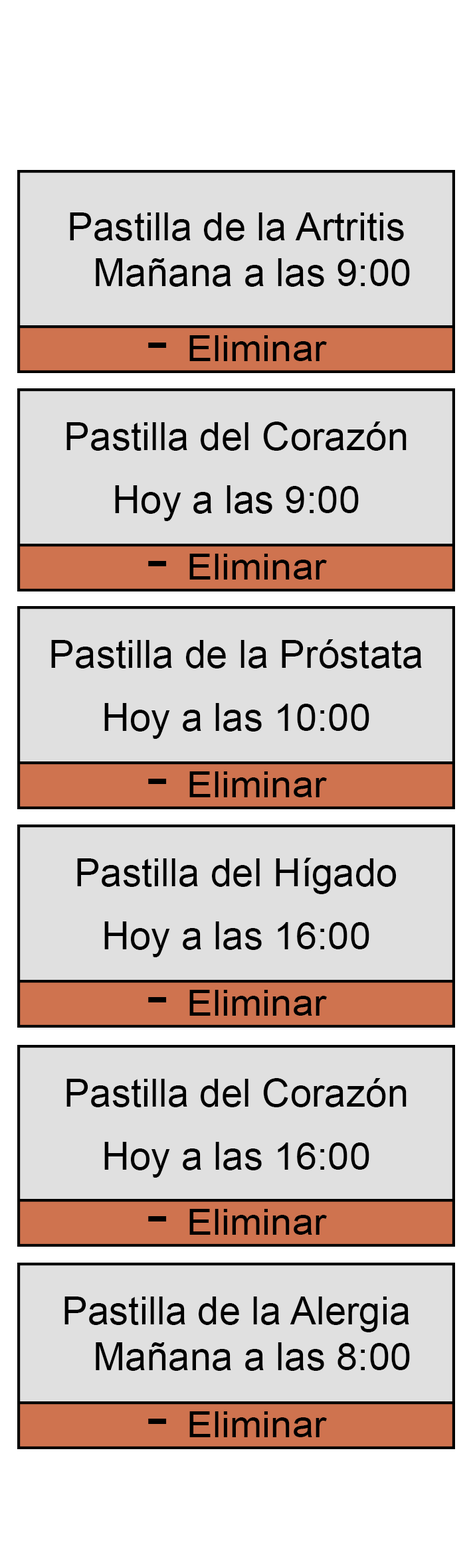
<style>
.page{position:relative;width:471px;height:1568px;background:#e0e0e0}
.page>*{position:absolute;margin:0}
.t1{font:38.7px "ArialMT";color:#000000}
.t2{font:35.6px "ArialMT";color:#000000;scale:1.09 1}
.t3{font:61.1px "ArialMT";color:#000000;scale:1.09 1}
</style>
<div class="page">
<p class="t1" style="left:70px;top:212px;width:334px;height:29px">Pastilla de la Artritis</p>
<p class="t1" style="left:96px;top:258px;width:314px;height:29px">Mañana a las 9:00</p>
<p class="t2" style="left:148px;top:335px;width:179px;height:26px"><span class="t3">- </span>Eliminar</p>
<p class="t1" style="left:66px;top:422px;width:340px;height:29px">Pastilla del Corazón</p>
<p class="t1" style="left:115px;top:485px;width:243px;height:36px">Hoy a las 9:00</p>
<p class="t2" style="left:148px;top:554px;width:179px;height:26px"><span class="t3">- </span>Eliminar</p>
<p class="t1" style="left:51px;top:639px;width:371px;height:29px">Pastilla de la Próstata</p>
<p class="t1" style="left:104px;top:703px;width:265px;height:36px">Hoy a las 10:00</p>
<p class="t2" style="left:148px;top:771px;width:179px;height:26px"><span class="t3">- </span>Eliminar</p>
<p class="t1" style="left:77px;top:858px;width:319px;height:36px">Pastilla del Hígado</p>
<p class="t1" style="left:104px;top:921px;width:265px;height:36px">Hoy a las 16:00</p>
<p class="t2" style="left:148px;top:990px;width:179px;height:26px"><span class="t3">- </span>Eliminar</p>
<p class="t1" style="left:66px;top:1078px;width:340px;height:29px">Pastilla del Corazón</p>
<p class="t1" style="left:104px;top:1142px;width:265px;height:36px">Hoy a las 16:00</p>
<p class="t2" style="left:148px;top:1209px;width:179px;height:26px"><span class="t3">- </span>Eliminar</p>
<p class="t1" style="left:64px;top:1296px;width:345px;height:36px">Pastilla de la Alergia</p>
<p class="t1" style="left:96px;top:1342px;width:314px;height:29px">Mañana a las 8:00</p>
<p class="t2" style="left:148px;top:1411px;width:179px;height:26px"><span class="t3">- </span>Eliminar</p>
</div>
